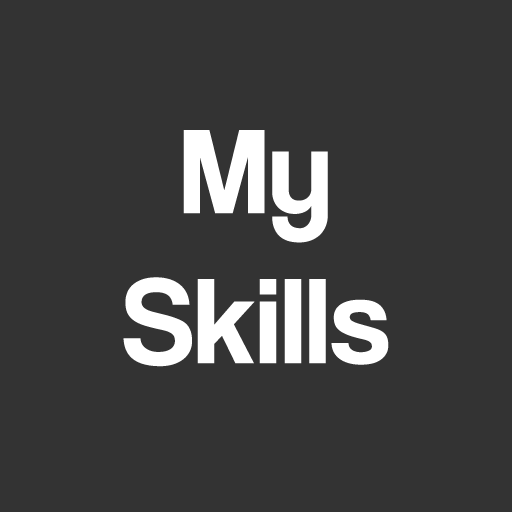
<style>
.page{position:relative;width:512px;height:512px;background:#333333}
.page>*{position:absolute;margin:0}
.t1{font:125px "CoolveticaRg-Regular";letter-spacing:0.015em;color:#ffffff}
</style>
<div class="page">
<p class="t1" style="left:123px;top:130px;width:266px;height:237px;text-align:center">My<br>Skills</p>
</div>
